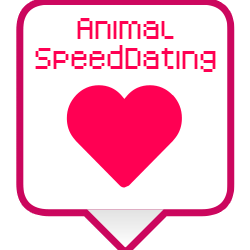
<style>
.page{position:relative;width:250px;height:250px;background:#ffffff}
.page>*{position:absolute;margin:0}
.t1{font:48px/30px "Kenney-Pixel";color:#ff0053}
</style>
<div class="page">
<p class="t1" style="left:35px;top:18px;width:181px;height:54px;text-align:center">Animal<br>SpeedDating</p>
</div>
